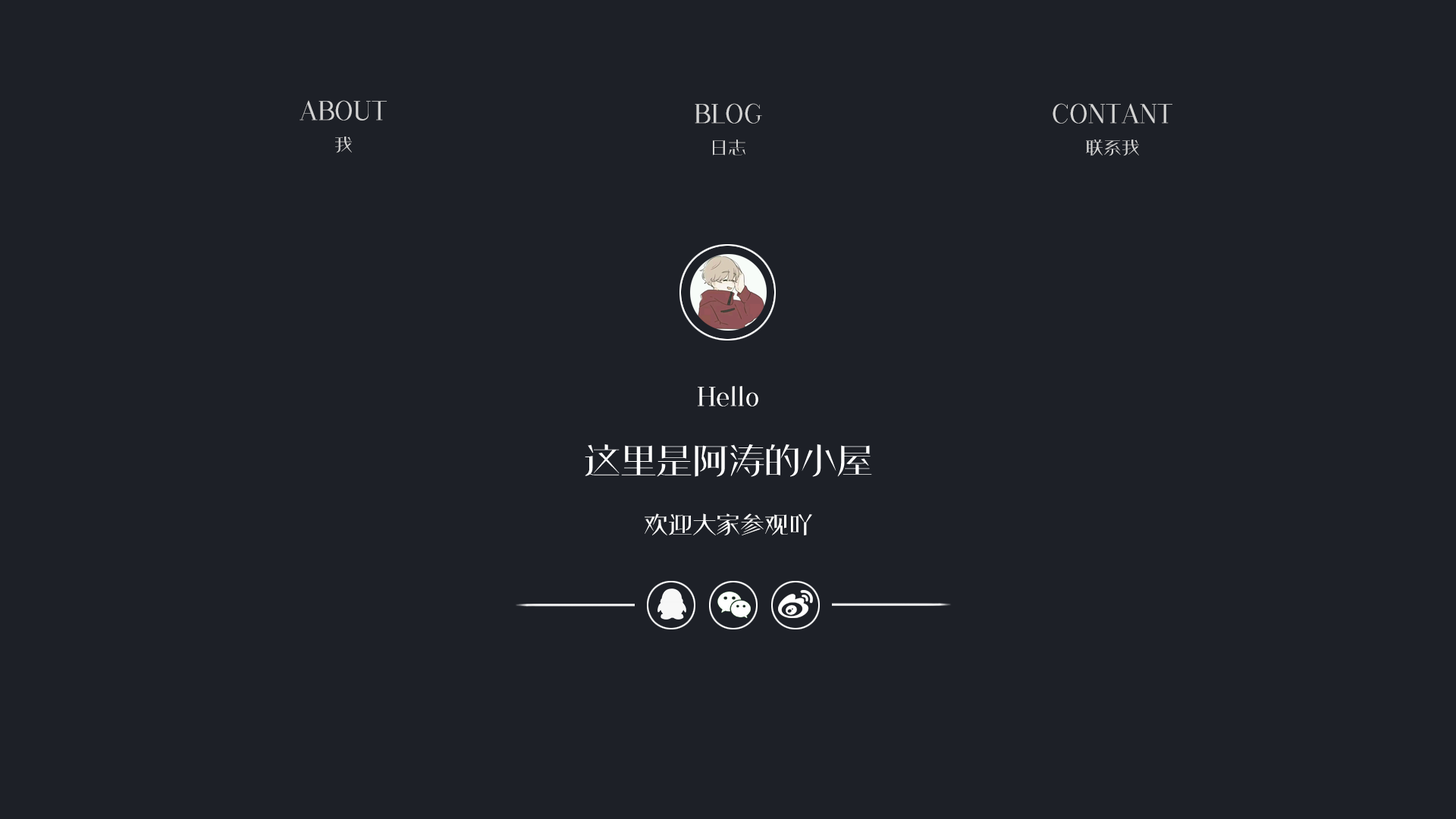
<style>
.page{position:relative;width:1456px;height:819px;background:#1d2027}
.page>*{position:absolute;margin:0}
.t1{font:24.3px "FZMingSTJW--GB1-0";letter-spacing:-0.01em;color:#d3d3d3}
.t2{font:18.2px "FZMingSTJW--GB1-0";letter-spacing:-0.01em;color:#d3d3d3}
.t3{font:24.3px "FZMingSTJW--GB1-0";letter-spacing:-0.01em;color:#ffffff}
</style>
<div class="page">
<p class="t1" style="left:300px;top:100px;width:87px;height:21px">ABOUT</p>
<p class="t1" style="left:695px;top:103px;width:67px;height:21px">BLOG</p>
<p class="t1" style="left:1053px;top:103px;width:119px;height:21px">CONTANT</p>
<p class="t2" style="left:335px;top:136px;width:17px;height:17px">我</p>
<p class="t2" style="left:713px;top:140px;width:32px;height:15px">日志</p>
<p class="t2" style="left:1086px;top:140px;width:53px;height:16px">联系我</p>
<p class="t3" style="left:698px;top:386px;width:60px;height:20px">Hello</p>
<p class="t3" style="left:645px;top:513px;width:167px;height:22px">欢迎大家参观吖</p>
</div>
